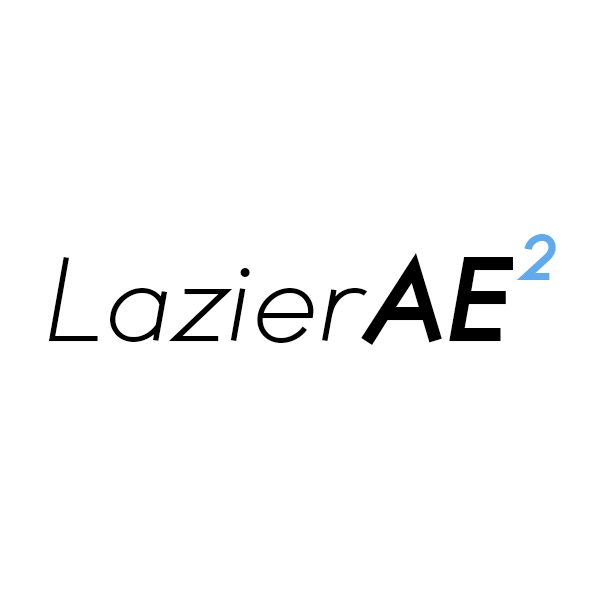
<style>
.page{position:relative;width:600px;height:600px;background:#ffffff}
.page>*{position:absolute;margin:0}
.t1{font:60.9px "TYPOGRAPHPRO-SemiBoldItalic";color:#5fabed}
.t2{font:108.3px "TYPOGRAPHPRO-LightItalic";color:#000000}
.t3{font:108.3px "TYPOGRAPHPRO-SemiBoldItalic";color:#000000}
</style>
<div class="page">
<p class="t1" style="left:516px;top:234px;width:40px;height:46px">2</p>
<p class="t2" style="left:48px;top:257px;width:320px;height:86px">Lazier</p>
<p class="t3" style="left:361px;top:253px;width:152px;height:92px">AE</p>
</div>
